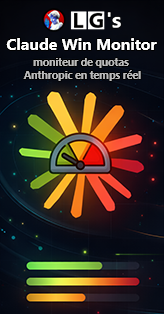
<style>
.page{position:relative;width:164px;height:314px}
.page>*{position:absolute;margin:0}
.t1{font:16px "SegoeUI-Bold";letter-spacing:-0.005em;color:#ffffff}
.t2{font:11px "SegoeUI-Bold";letter-spacing:-0.035em;color:#bbbbbb}
</style>
<div class="page">
<p class="t1" style="left:6px;top:38px;width:151px;height:12px">Claude Win Monitor</p>
<p class="t2" style="left:23px;top:58px;width:118px;height:23px;text-align:center">moniteur de quotas <br>Anthropic en temps réel</p>
</div>
